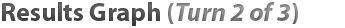
<style>
.page{position:relative;width:345px;height:28px;background:#ffffff}
.page>*{position:absolute;margin:0}
.t1{font:26px "MyriadPro-Bold";color:#464646}
.t2{font:26px "MyriadPro-Bold";color:#898989}
.t3{font:26px "MyriadPro-BoldIt";color:#898989}
</style>
<div class="page">
<p class="t1" style="left:2px;top:2px;width:296px;height:24px">Results Graph <span class="t2">(</span><span class="t3">Turn 2 of 3</span><span class="t2">)</span></p>
</div>
